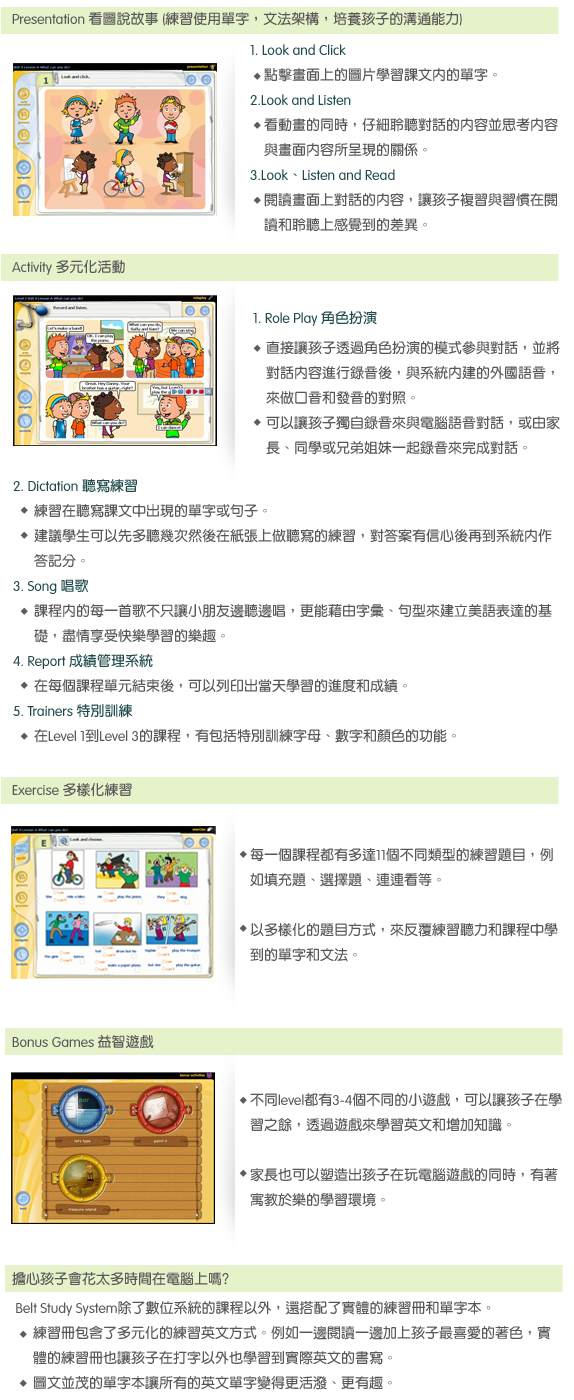
<style>
.page{position:relative;width:574px;height:1400px;background:#ffffff}
.page>*{position:absolute;margin:0}
.t1{font:14px "ARYuanB5-Bold";color:#585656}
.t2{font:14px "VAGRounded-Light";color:#585656}
.t3{font:14px/25px "ARYuanB5-Bold";color:#585656}
.t4{font:14px/25px "VAGRounded-Light";color:#204a4c}
.t5{font:14px/25px "ARYuanB5-Bold";color:#204a4c}
.t6{font:14px "VAGRounded-Light";color:#204a4c}
.t7{font:14px "ARYuanB5-Bold";color:#204a4c}
.t8{font:14px/25px "VAGRounded-Light";color:#585656}
</style>
<div class="page">
<p class="t1" style="left:12px;top:12px;width:450px;height:14px"><span class="t2">Presentation </span>看圖說故事<span class="t2"> (</span>練習使用單字，文法架構，培養孩子的溝通能力<span class="t2">)</span></p>
<p class="t3" style="left:250px;top:44px;width:308px;height:188px"><span class="t4">1. Look and Click<br></span>  點擊畫面上的圖片學習課文內的單字。<br><span class="t4">2.Look and Listen<br></span>  看動畫的同時，仔細聆聽對話的內容並思考內容<br>  與畫面內容所呈現的關係。<br><span class="t4">3.Look</span><span class="t5">、</span><span class="t4">Listen and Read<br></span>  閱讀畫面上對話的內容，讓孩子複習與習慣在閱<br>  讀和聆聽上感覺到的差異。</p>
<p class="t2" style="left:12px;top:260px;width:113px;height:15px">Activity <span class="t1">多元化活動</span></p>
<p class="t6" style="left:253px;top:311px;width:124px;height:15px">1. Role Play <span class="t7">角色扮演</span></p>
<p class="t3" style="left:266px;top:341px;width:294px;height:114px">直接讓孩子透過角色扮演的模式參與對話，並將對話內容進行錄音後，與系統內建的外國語音，來做口音和發音的對照。<br>可以讓孩子獨自錄音來與電腦語音對話，或由家長、同學或兄弟姐妹一起錄音來完成對話。</p>
<p class="t3" style="left:13px;top:479px;width:539px;height:264px"><span class="t4">2. Dictation </span><span class="t5">聽寫練習<br></span>   練習在聽寫課文中出現的單字或句子。<br>   建議學生可以先多聽幾次然後在紙張上做聽寫的練習，對答案有信心後再到系統內作<br>   答記分。<br><span class="t4">3. Song </span><span class="t5">唱歌<br></span>   課程內的每一首歌不只讓小朋友邊聽邊唱，更能藉由字彙、句型來建立美語表達的基 <br>   礎，盡情享受快樂學習的樂趣。<br><span class="t4">4. Report </span><span class="t5">成績管理系統<br></span>   在每個課程單元結束後，可以列印出當天學習的進度和成績。<br><span class="t4">5. Trainers </span><span class="t5">特別訓練<br></span>   在<span class="t8">Level 1</span>到<span class="t8">Level 3</span>的課程，有包括特別訓練字母、數字和顏色的功能。</p>
<p class="t2" style="left:12px;top:783px;width:120px;height:14px">Exercise <span class="t1">多樣化練習</span></p>
<p class="t3" style="left:250px;top:848px;width:308px;height:114px">每一個課程都有多達<span class="t8">11</span>個不同類型的練習題目，例如填充題、選擇題、連連看等。<br><br>以多樣化的題目方式，來反覆練習聽力和課程中學到的單字和文法。</p>
<p class="t2" style="left:12px;top:1035px;width:142px;height:14px">Bonus Games <span class="t1">益智遊戲</span></p>
<p class="t3" style="left:250px;top:1093px;width:312px;height:114px">不同<span class="t8">level</span>都有<span class="t8">3-4</span>個不同的小遊戲，可以讓孩子在學習之餘，透過遊戲來學習英文和增加知識。 <br><br>家長也可以塑造出孩子在玩電腦遊戲的同時，有著寓教於樂的學習環境。</p>
<p class="t1" style="left:12px;top:1272px;width:217px;height:14px">擔心孩子會花太多時間在電腦上嗎?</p>
<p class="t3" style="left:16px;top:1301px;width:535px;height:89px"><span class="t8"> Belt Study System</span>除了數位系統的課程以外，還搭配了實體的練習冊和單字本。<br>      練習冊包含了多元化的練習英文方式。例如一邊閱讀一邊加上孩子最喜愛的著色，實  <br>   體的練習冊也讓孩子在打字以外也學習到實際英文的書寫。<br>      圖文並茂的單字本讓所有的英文單字變得更活潑、更有趣。</p>
</div>
